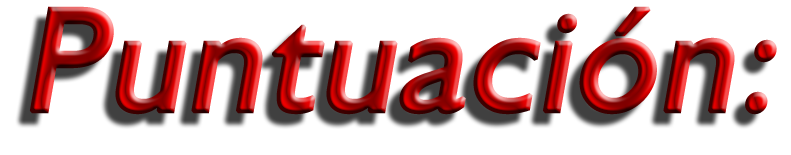
<style>
.page{position:relative;width:791px;height:155px;background:#ffffff}
.page>*{position:absolute;margin:0}
.t1{font:150px "Humanist521BT-Roman";font-weight:bold;font-style:italic}
</style>
<div class="page">
<p class="t1" style="left:29px;top:6px;width:748px;height:109px">Puntuación:</p>
</div>
